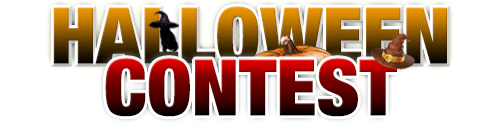
<style>
.page{position:relative;width:500px;height:130px;background:#ffffff}
.page>*{position:absolute;margin:0}
.t1{font:78.2px "HelveticaNeue-CondensedBlack"}
</style>
<div class="page">
<p class="t1" style="left:53px;top:6px;width:394px;height:59px">HALLOWEEN</p>
<p class="t1" style="left:105px;top:58px;width:292px;height:59px">CONTEST</p>
</div>
